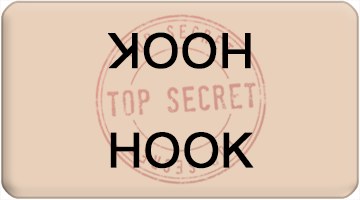
<style>
.page{position:relative;width:360px;height:200px;background:#e8d0bb}
.page>*{position:absolute;margin:0}
.t1{font:48px "ArialMT";color:#000000;font-weight:bold}
</style>
<div class="page">
<p class="t1" style="left:108px;top:32px;width:143px;height:37px;rotate:180deg">HOOK</p>
<p class="t1" style="left:110px;top:132px;width:144px;height:37px">HOOK</p>
</div>
